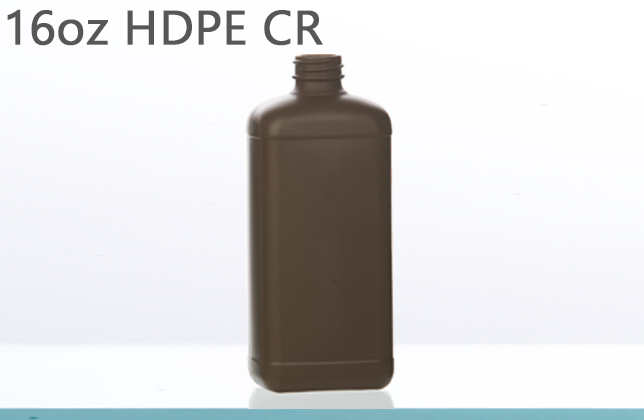
<style>
.page{position:relative;width:644px;height:420px}
.page>*{position:absolute;margin:0}
.t1{font:48px "Gadugi";color:#575757;font-weight:bold}
</style>
<div class="page">
<p class="t1" style="left:7px;top:9px;width:316px;height:37px">16oz HDPE CR</p>
</div>
